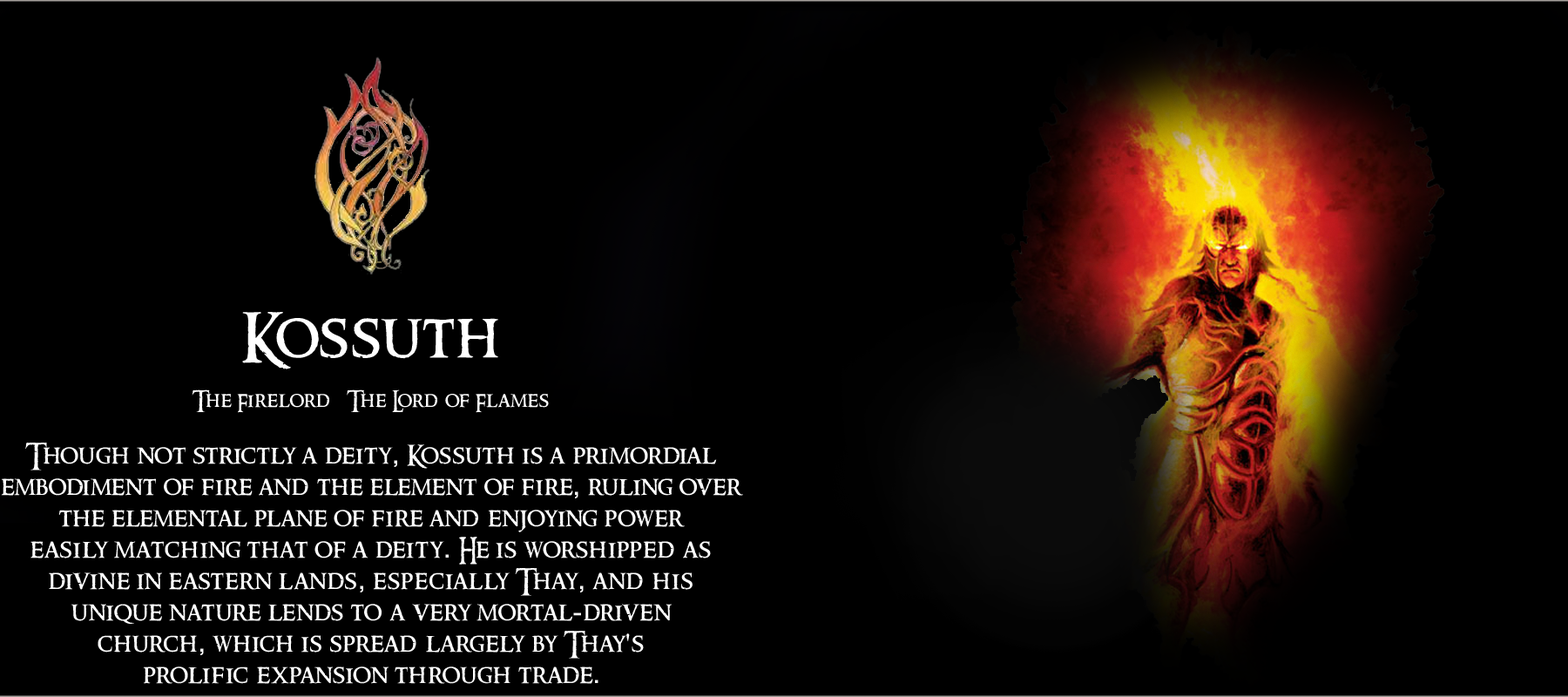
<style>
.page{position:relative;width:1568px;height:697px;background:#000000}
.page>*{position:absolute;margin:0}
.t1{font:26.1px "RingbearerMedium";letter-spacing:0.025em;color:#ffffff}
.t2{font:62.7px "RingbearerMedium";letter-spacing:0.025em;color:#ffffff}
.t3{font:20.9px "RingbearerMedium";letter-spacing:0.025em;color:#ffffff}
.t4{font:26.1px "Rockwell";letter-spacing:0.025em;color:#ffffff}
</style>
<div class="page">
<p class="t1" style="left:1px;top:312px;width:742px;height:372px;text-align:center"><span class="t2">Kossuth<br></span><span class="t3"><br>The Firelord   The Lord of Flames<br><br></span>Though not strictly a deity<span class="t4">,</span> Kossuth is a primordial<br>embodiment of fire and the element of fire<span class="t4">,</span> ruling over the elemental plane of fire and enjoying power <br>easily matching that of a deity<span class="t4">.</span> He is worshipped as divine in eastern lands<span class="t4">,</span> especially Thay<span class="t4">,</span> and his <br>unique nature lends to a very mortal<span class="t4">-</span>driven <br>church<span class="t4">,</span> which is spread largely by Thay<span class="t4">'</span>s <br>prolific expansion through trade<span class="t4">.</span></p>
</div>
